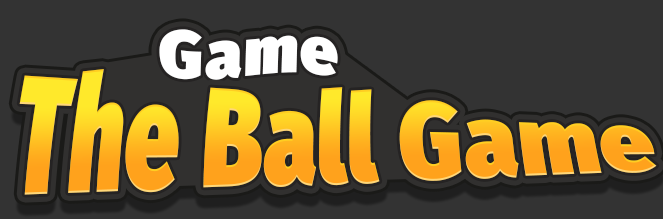
<style>
.page{position:relative;width:663px;height:219px;background:#333333}
.page>*{position:absolute;margin:0}
.t1{font:66.7px "FiraSans-Ultra";letter-spacing:0.025em;color:#ffffff}
.t2{font:77.8px "FiraSans-Ultra";letter-spacing:0.01em;scale:1.25 1}
</style>
<div class="page">
<p class="t1" style="left:159px;top:29px;width:179px;height:51px;rotate:2deg">Game</p>
<p class="t2" style="left:19px;top:69px;width:638px;height:126px">The Ball Game</p>
</div>
